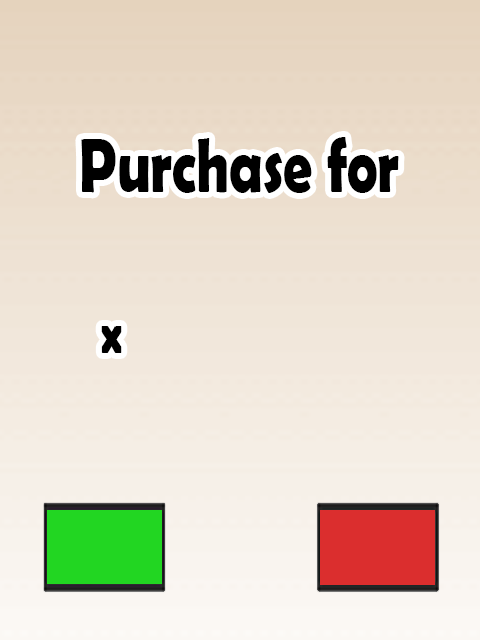
<style>
.page{position:relative;width:480px;height:640px}
.page>*{position:absolute;margin:0}
.t1{font:76.8px "BerlinSansFBDemi-Bold";color:#000000;scale:0.75 1}
.t2{font:57.6px "BerlinSansFBDemi-Bold";color:#000000;scale:0.75 1}
</style>
<div class="page">
<p class="t1" style="left:81px;top:137px;width:318px;height:216px">Purchase for<br><br><span class="t2">  x</span></p>
</div>
